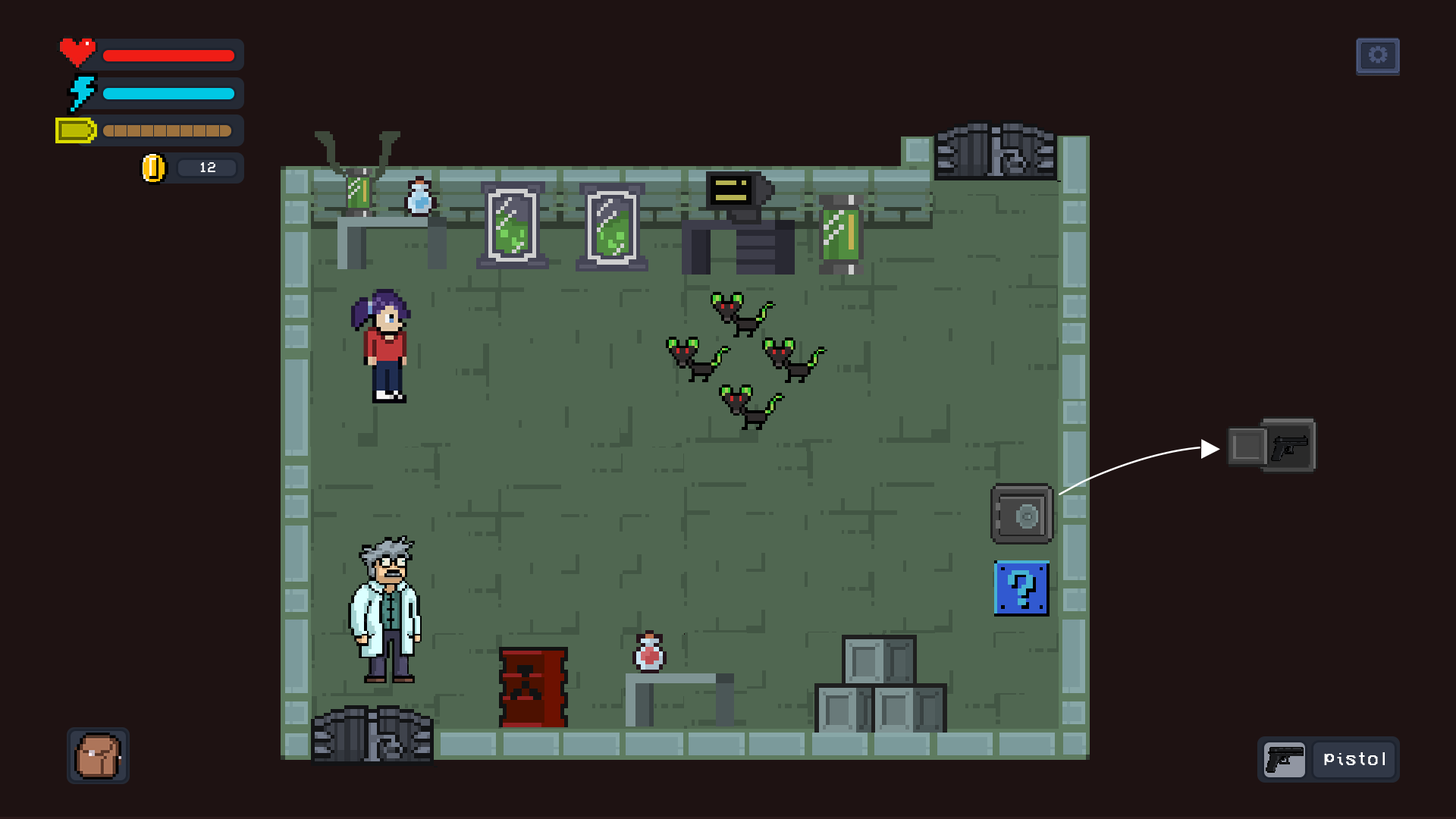
<style>
.page{position:relative;width:1456px;height:819px;background:#1e1212}
.page>*{position:absolute;margin:0}
.t1{font:14.7px "VCROSDMono";color:#ffffff}
.t2{font:18.7px "VCROSDMono";color:#ffffff}
</style>
<div class="page">
<p class="t1" style="left:200px;top:162px;width:15px;height:10px">12</p>
<p class="t2" style="left:1324px;top:752px;width:61px;height:13px">pistol</p>
</div>
